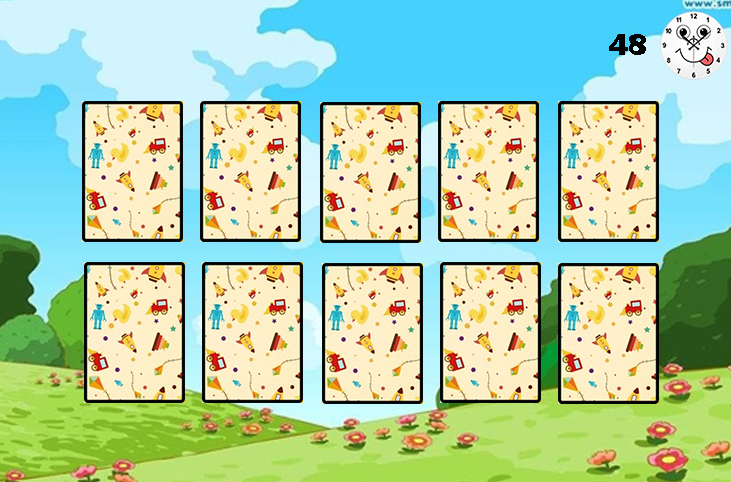
<style>
.page{position:relative;width:731px;height:482px}
.page>*{position:absolute;margin:0}
.t1{font:36px "BerlinSansFBDemi-Bold";color:#000000}
</style>
<div class="page">
<p class="t1" style="left:609px;top:34px;width:37px;height:21px">48</p>
</div>
